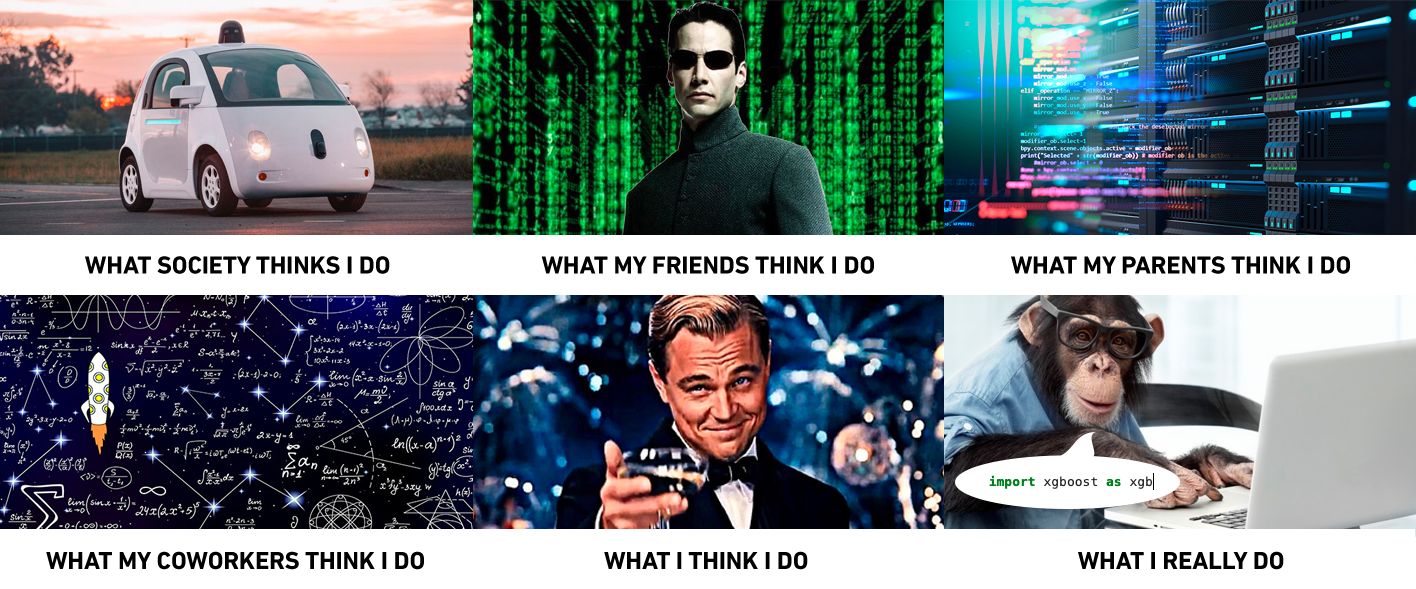
<style>
.page{position:relative;width:1416px;height:589px}
.page>*{position:absolute;margin:0}
.t1{font:25px "DINNextLTPro-Bold";color:#000000}
</style>
<div class="page">
<p class="t1" style="left:85px;top:256px;width:305px;height:18px">WHAT SOCIETY THINKS I DO</p>
<p class="t1" style="left:541px;top:256px;width:333px;height:18px">WHAT MY FRIENDS THINK I DO</p>
<p class="t1" style="left:1011px;top:256px;width:339px;height:18px">WHAT MY PARENTS THINK I DO</p>
<p class="t1" style="left:46px;top:551px;width:378px;height:19px">WHAT MY COWORKERS THINK I DO</p>
<p class="t1" style="left:604px;top:551px;width:204px;height:19px">WHAT I THINK I DO</p>
<p class="t1" style="left:1078px;top:551px;width:206px;height:19px">WHAT I REALLY DO</p>
</div>
